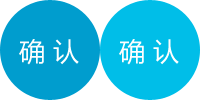
<style>
.page{position:relative;width:200px;height:100px;background:#00bee8}
.page>*{position:absolute;margin:0}
.t1{font:26.2px "MicrosoftYaHei";color:#fefefe}
</style>
<div class="page">
<p class="t1" style="left:19px;top:39px;width:60px;height:26px">确 认</p>
<p class="t1" style="left:119px;top:39px;width:60px;height:26px">确 认</p>
</div>
